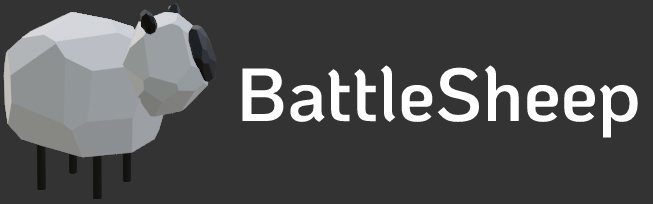
<style>
.page{position:relative;width:653px;height:204px;background:#333333}
.page>*{position:absolute;margin:0}
.t1{font:75px "KoHo-SemiBold";color:#ffffff}
</style>
<div class="page">
<p class="t1" style="left:242px;top:65px;width:396px;height:73px">BattleSheep</p>
</div>
